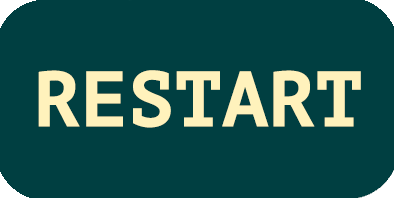
<style>
.page{position:relative;width:394px;height:198px;background:#003f41}
.page>*{position:absolute;margin:0}
.t1{font:78.2px "PTMono-Bold";color:#fff2bc}
</style>
<div class="page">
<p class="t1" style="left:38px;top:70px;width:323px;height:58px">RESTART</p>
</div>
